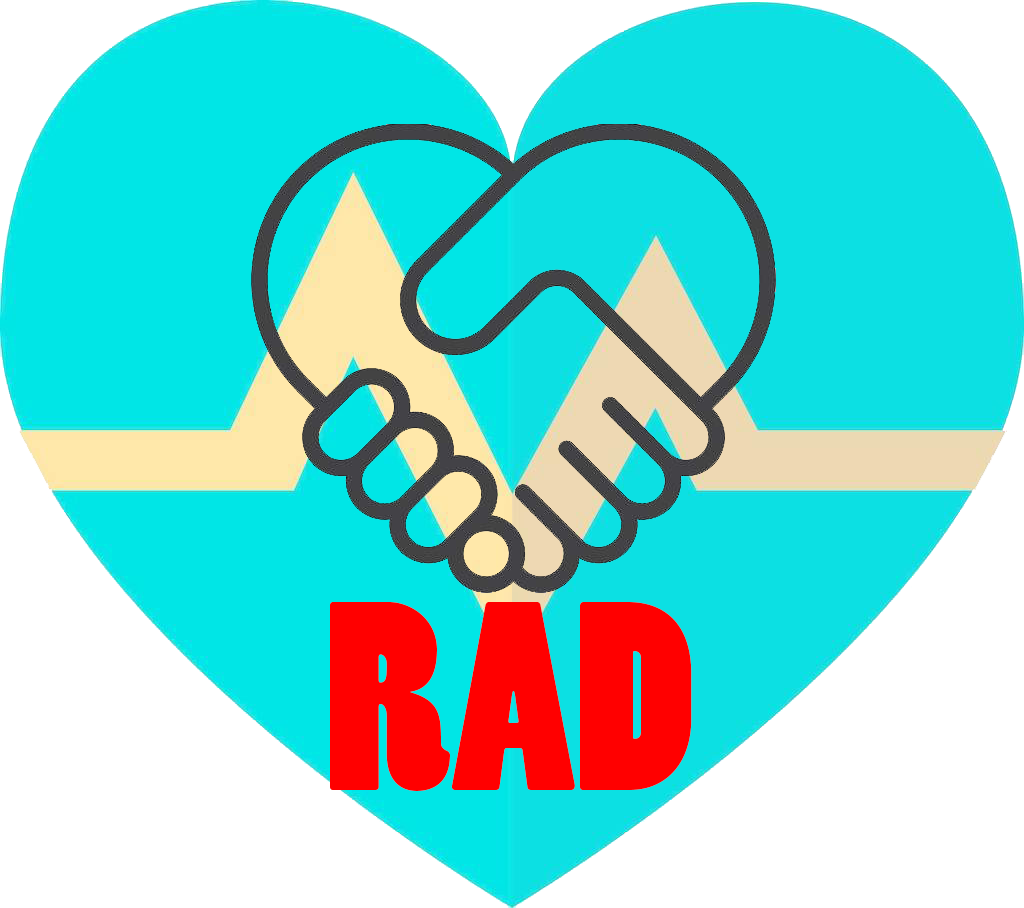
<style>
.page{position:relative;width:1024px;height:908px;background:#ffffff}
.page>*{position:absolute;margin:0}
.t1{font:250px "PoplarStd";color:#ff0000}
</style>
<div class="page">
<p class="t1" style="left:330px;top:602px;width:362px;height:189px">RAD</p>
</div>
